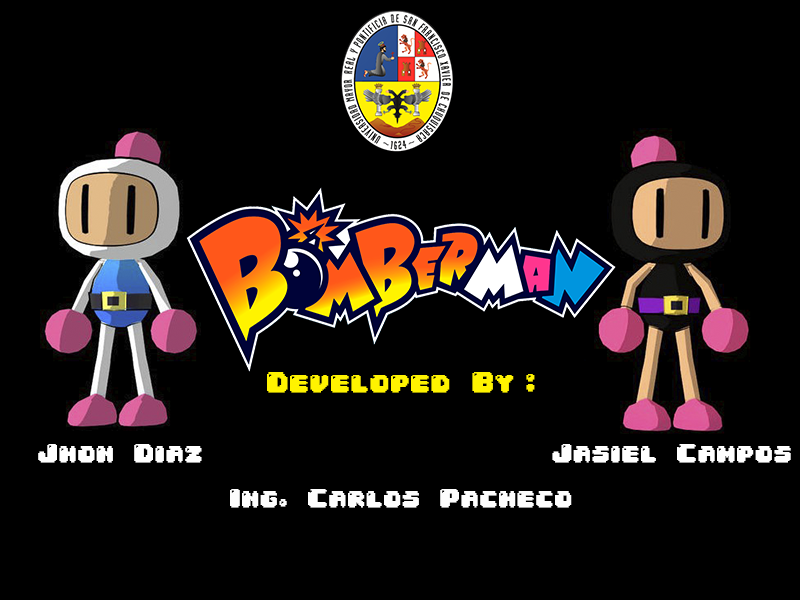
<style>
.page{position:relative;width:800px;height:600px;background:#000000}
.page>*{position:absolute;margin:0}
.t1{font:24px "04b30";color:#fff300;font-weight:bold}
.t2{font:22px "04b30";color:#ffffff;font-weight:bold}
.t3{font:22px "04b30";color:#fdfdfd;font-weight:bold}
</style>
<div class="page">
<p class="t1" style="left:267px;top:372px;width:268px;height:21px">Developed By :</p>
<p class="t2" style="left:38px;top:444px;width:164px;height:19px">Jhon Diaz</p>
<p class="t2" style="left:552px;top:444px;width:239px;height:19px">Jasiel Campos</p>
<p class="t3" style="left:230px;top:489px;width:342px;height:19px">Ing. Carlos Pacheco</p>
</div>
